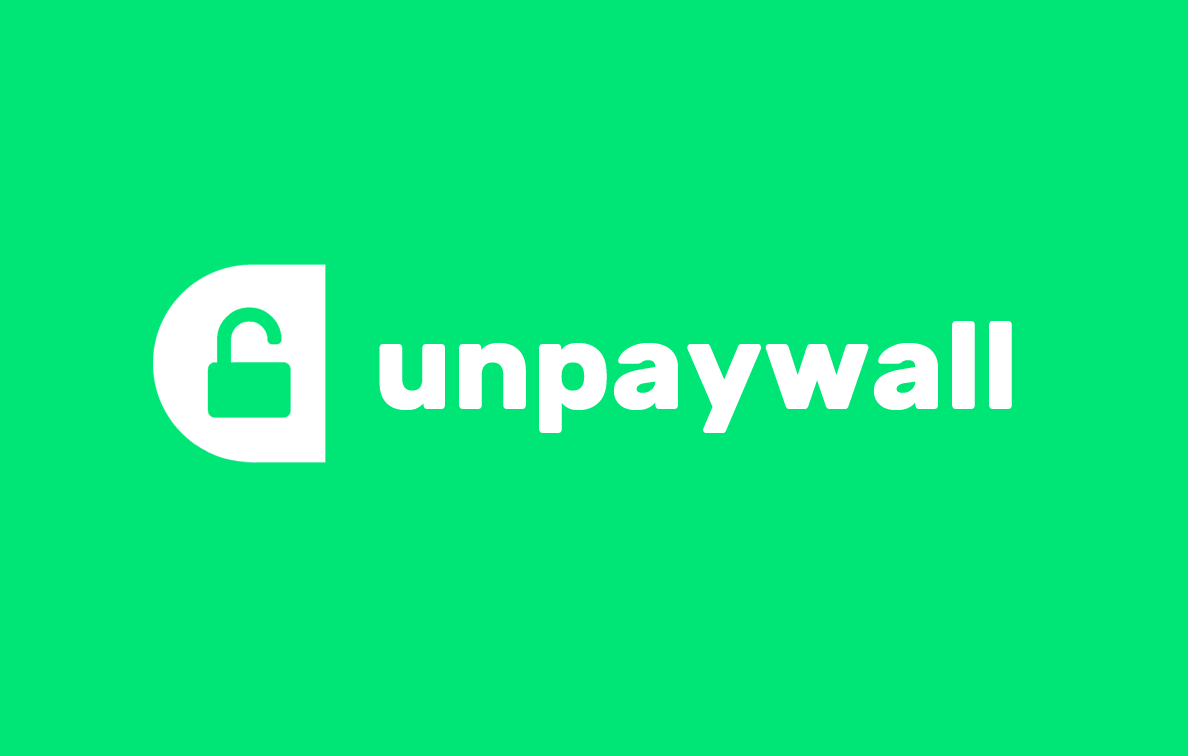
<style>
.page{position:relative;width:1188px;height:756px;background:#00e676}
.page>*{position:absolute;margin:0}
.t1{font:124.9px "Rubik-Bold";color:#ffffff}
</style>
<div class="page">
<p class="t1" style="left:379px;top:321px;width:633px;height:112px">unpaywall</p>
</div>
